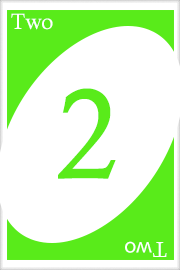
<style>
.page{position:relative;width:180px;height:270px;background:#ffffff}
.page>*{position:absolute;margin:0}
.t1{font:22px "CalistoMT";color:#ffffff}
.t2{font:128px "CalistoMT";color:#59eb1a}
.t3{font:21.7px "MyriadPro-Regular";color:#ffffff}
.t4{font:21.7px "CalistoMT";color:#ffffff}
</style>
<div class="page">
<p class="t1" style="left:11px;top:13px;width:42px;height:17px">Two</p>
<p class="t2" style="left:58px;top:88px;width:58px;height:91px">2</p>
<p class="t3" style="left:125px;top:241px;width:42px;height:16px;rotate:180deg"><span class="t4">T</span>wo</p>
</div>
